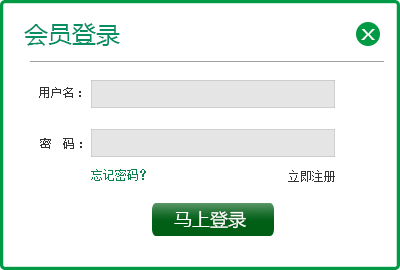
<style>
.page{position:relative;width:400px;height:270px;background:#ffffff}
.page>*{position:absolute;margin:0}
.t1{font:24px "MicrosoftYaHei";color:#098e64}
.t2{font:15.3px "MicrosoftYaHei";color:#ffffff;scale:1.42 1}
.t3{font:12px "MicrosoftYaHei";color:#333333}
.t4{font:12px "SimSun";color:#0c814b}
.t5{font:12px "SimSun";color:#333333}
.t6{font:18px "MicrosoftYaHei";color:#ffffff}
</style>
<div class="page">
<p class="t1" style="left:24px;top:23px;width:96px;height:23px">会员登录</p>
<p class="t2" style="left:361px;top:29px;width:14px;height:11px">X</p>
<p class="t3" style="left:39px;top:87px;width:42px;height:11px">用户名：</p>
<p class="t3" style="left:40px;top:138px;width:42px;height:11px">密   码：</p>
<p class="t4" style="left:91px;top:169px;width:55px;height:12px">忘记密码？</p>
<p class="t5" style="left:288px;top:170px;width:47px;height:12px">立即注册</p>
<p class="t6" style="left:174px;top:211px;width:72px;height:18px">马上登录</p>
</div>
